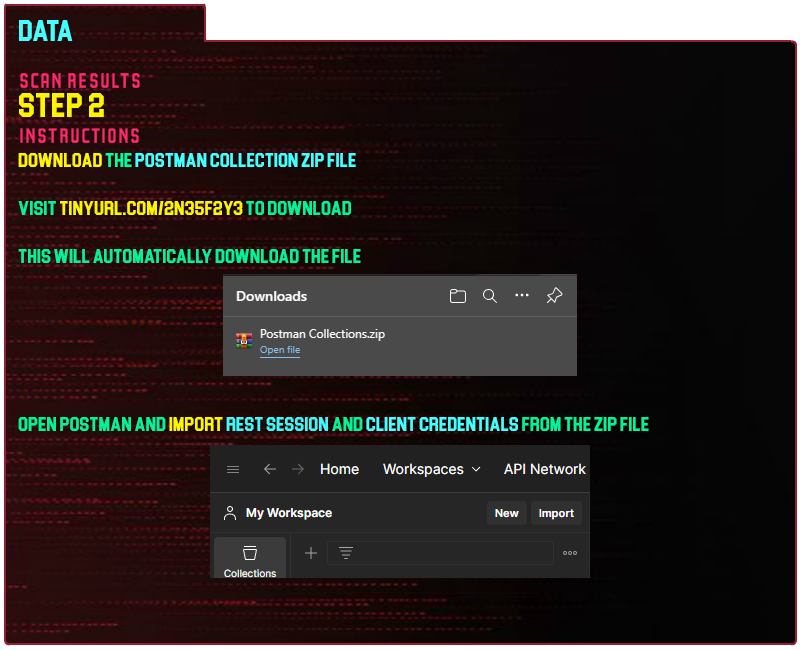
<style>
.page{position:relative;width:800px;height:650px}
.page>*{position:absolute;margin:0}
.t1{font:30px "Blockletter";color:#43ffff}
.t2{font:35px "Party-Lights-[WLM]-Flat";color:#ff296d}
.t3{font:35px "Blockletter";color:#fdf500}
.t4{font:20px "Blockletter";color:#02f498}
.t5{font:20px "Blockletter";color:#fff600}
.t6{font:20px "Blockletter";color:#00ff9f}
.t7{font:20px "Blockletter";color:#43ffff}
.t8{font:20px "Blockletter";color:#fdf500}
.t9{font:20px "Blockletter";color:#41f7f7}
</style>
<div class="page">
<p class="t1" style="left:19px;top:20px;width:54px;height:21px">Data</p>
<p class="t2" style="left:20px;top:73px;width:120px;height:15px">Scan REsults</p>
<p class="t3" style="left:19px;top:93px;width:85px;height:24px">step 2</p>
<p class="t2" style="left:20px;top:128px;width:119px;height:15px">instructions</p>
<p class="t4" style="left:18px;top:153px;width:631px;height:278px"><span class="t5">download </span><span class="t6">the </span><span class="t7">postman collection zip file<br><br></span>visit <span class="t8">tinyurl.com/2n35f2y3</span> to download<br><br>this will automatically download the file<br><br><br><br><br><br><br>open postman and <span class="t8">import </span><span class="t9">REST session</span> and <span class="t7">client credentials</span> from the zip file</p>
</div>
